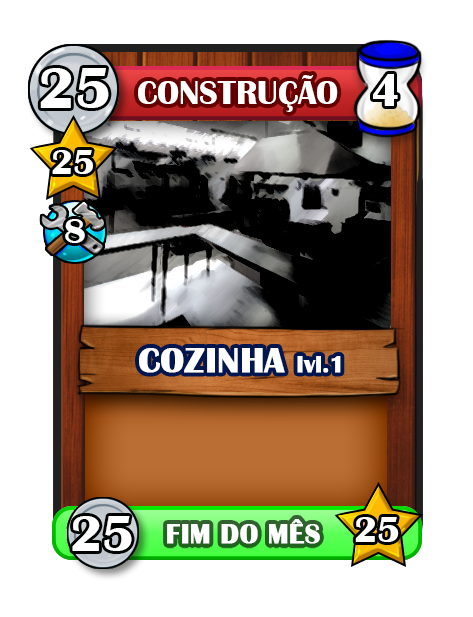
<style>
.page{position:relative;width:473px;height:617px;background:#ffffff}
.page>*{position:absolute;margin:0}
.t1{font:60px "BritannicBold";color:#ffffff}
.t2{font:34px "BritannicBold";color:#ffffff}
.t3{font:48px "BritannicBold";color:#ffffff}
.t4{font:36px "BritannicBold";color:#ffffff}
.t5{font:36px "BritannicBold";color:#ffffff;font-weight:bold}
.t6{font:24px "BritannicBold";color:#ffffff;font-weight:bold}
.t7{font:52.8px "BritannicBold";color:#ffffff}
.t8{font:28px "BritannicBold";color:#ffffff;font-weight:bold}
.t9{font:38px "BritannicBold";color:#ffffff}
</style>
<div class="page">
<p class="t1" style="left:40px;top:68px;width:69px;height:40px">255</p>
<p class="t2" style="left:138px;top:75px;width:200px;height:37px">CONSTRUÇÃO</p>
<p class="t3" style="left:373px;top:74px;width:25px;height:32px">4</p>
<p class="t4" style="left:52px;top:150px;width:41px;height:24px">25</p>
<p class="t4" style="left:65px;top:219px;width:20px;height:24px">8</p>
<p class="t5" style="left:139px;top:348px;width:202px;height:25px">COZINHA <span class="t6">lvl.1</span></p>
<p class="t7" style="left:72px;top:516px;width:60px;height:35px">25</p>
<p class="t8" style="left:167px;top:519px;width:153px;height:25px">FIM DO MÊS</p>
<p class="t9" style="left:355px;top:517px;width:44px;height:25px">25</p>
</div>
